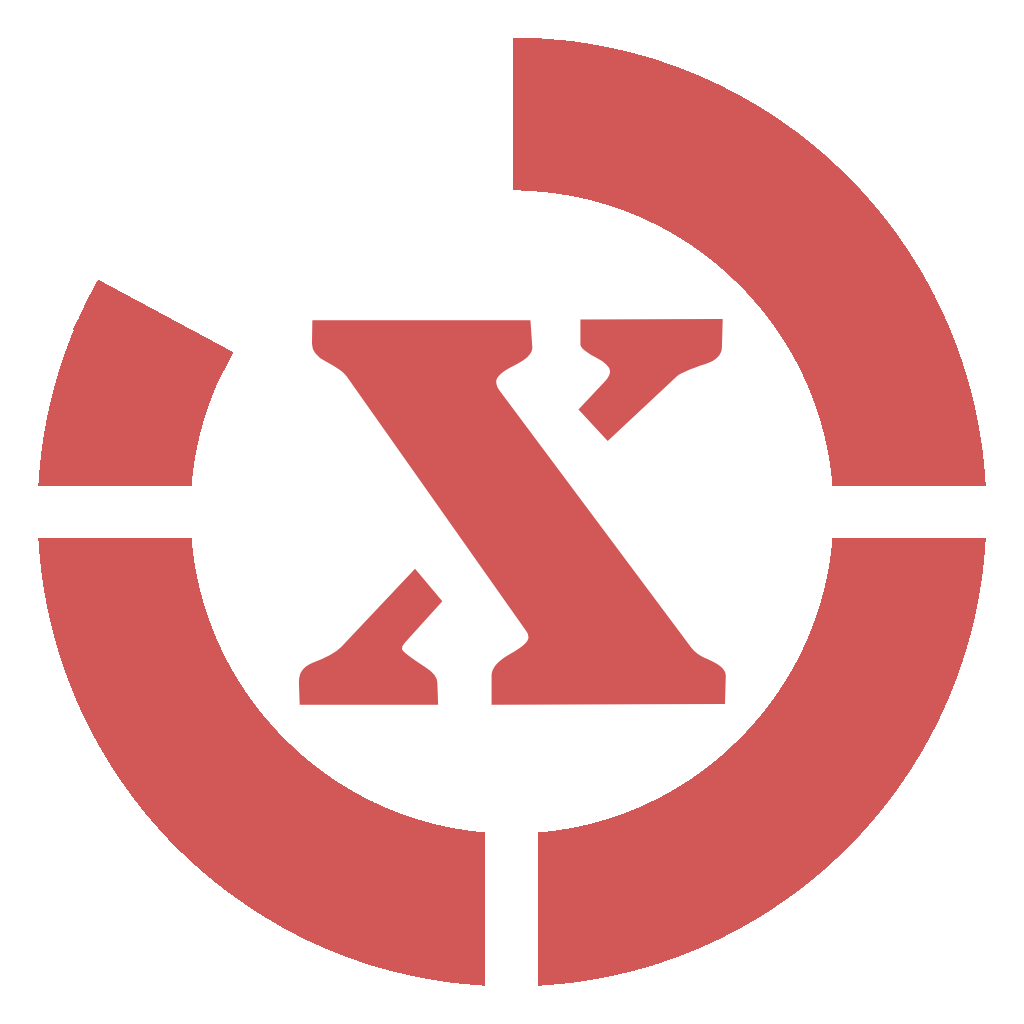
<style>
.page{position:relative;width:1024px;height:1024px;background:#ffffff}
.page>*{position:absolute;margin:0}
.t1{font:500px "Lintsec";color:#d25757}
</style>
<div class="page">
<p class="t1" style="left:298px;top:319px;width:428px;height:386px">X</p>
</div>
